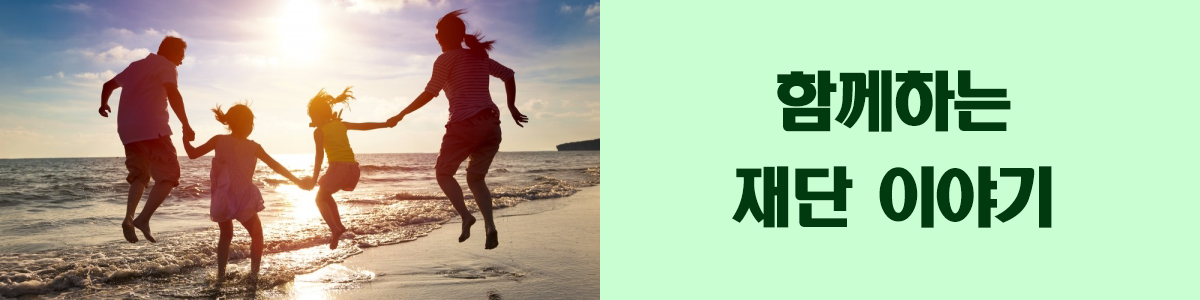
<style>
.page{position:relative;width:1200px;height:300px;background:#c9fdd2}
.page>*{position:absolute;margin:0}
.t1{font:64px/48px "HeadlineR-HM";letter-spacing:-0.08em;color:#003a0e}
</style>
<div class="page">
<p class="t1" style="left:732px;top:70px;width:320px;height:158px;text-align:center">함께하는<br> <br>재단 이야기</p>
</div>
